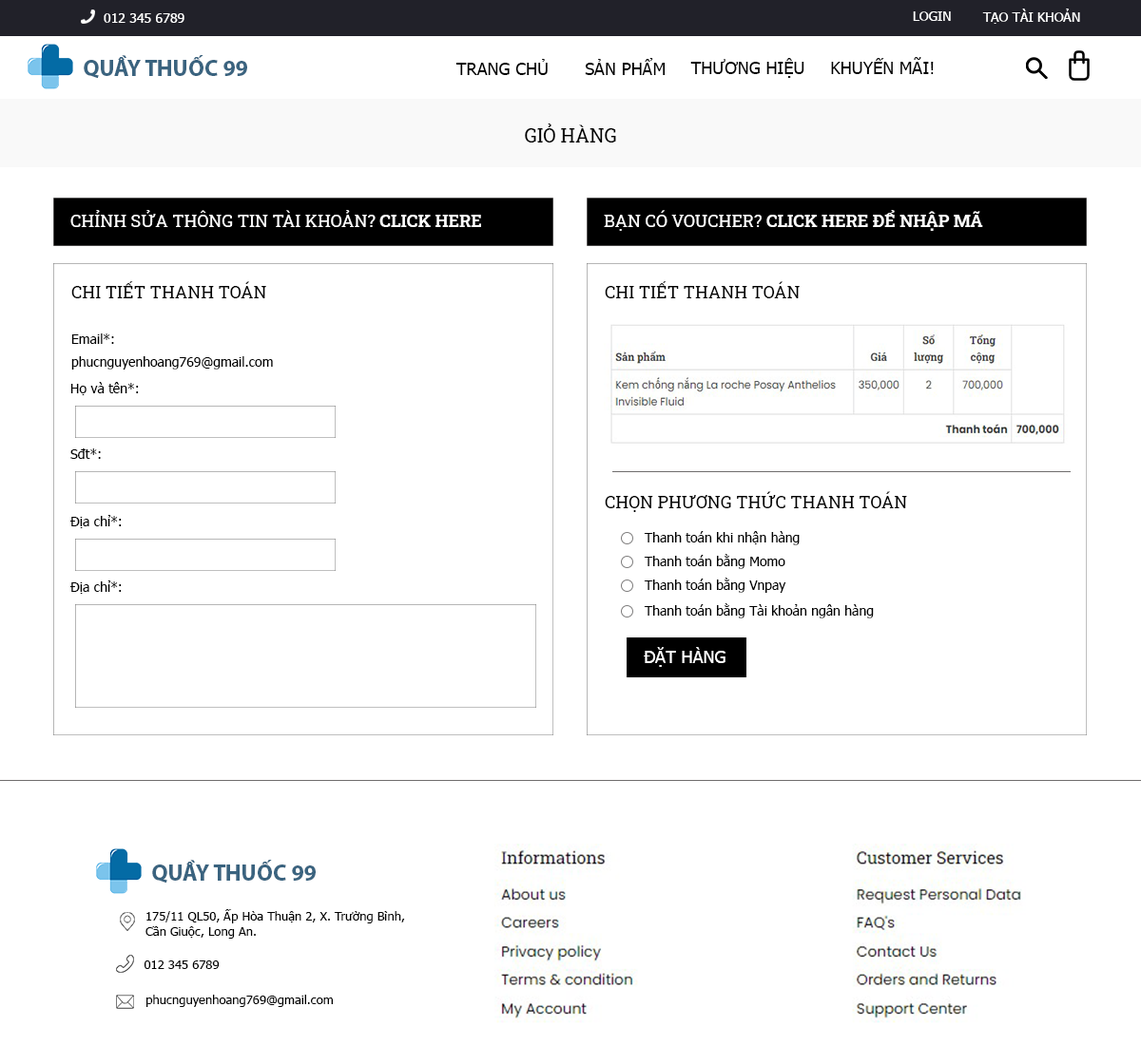
<style>
.page{position:relative;width:1141px;height:1045px;background:#ffffff}
.page>*{position:absolute;margin:0}
.t1{font:13.3px "Tahoma";color:#ffffff}
.t2{font:22.8px "MyriadPro-Bold";color:#3a637f}
.t3{font:17.1px "Tahoma";color:#000000}
.t4{font:19px "RobotoSlab-Regular";color:#000000}
.t5{font:17.1px "RobotoSlab-Regular";color:#ffffff}
.t6{font:17.1px "RobotoSlab-Bold";color:#ffffff}
.t7{font:13.3px/22.8px "Tahoma";color:#000000}
.t8{font:17.1px/22.8px "RobotoSlab-Regular";color:#000000}
.t9{font:17.1px "RobotoSlab-Regular";color:#000000}
.t10{font:13.3px "Tahoma";color:#000000}
.t11{font:17.1px "Tahoma";color:#ffffff}
.t12{font:12.4px "Tahoma";color:#000000}
</style>
<div class="page">
<p class="t1" style="left:104px;top:13px;width:80px;height:10px">012 345 6789</p>
<p class="t1" style="left:912px;top:11px;width:38px;height:10px">LOGIN</p>
<p class="t1" style="left:982px;top:9px;width:98px;height:15px">TẠO TÀI KHOẢN</p>
<p class="t2" style="left:84px;top:55px;width:163px;height:24px">QUẦY THUỐC 99</p>
<p class="t3" style="left:455px;top:59px;width:92px;height:16px">TRANG CHỦ</p>
<p class="t3" style="left:585px;top:58px;width:80px;height:17px">SẢN PHẨM</p>
<p class="t3" style="left:690px;top:58px;width:114px;height:20px">THƯƠNG HIỆU</p>
<p class="t3" style="left:831px;top:57px;width:102px;height:17px">KHUYẾN MÃI!</p>
<p class="t4" style="left:525px;top:124px;width:91px;height:19px">GIỎ HÀNG</p>
<p class="t5" style="left:70px;top:210px;width:411px;height:17px">CHỈNH SỬA THÔNG TIN TÀI KHOẢN? <span class="t6">CLICK HERE</span></p>
<p class="t6" style="left:604px;top:210px;width:379px;height:21px"><span class="t5">BẠN CÓ VOUCHER? </span>CLICK HERE ĐỂ NHẬP MÃ</p>
<p class="t7" style="left:71px;top:281px;width:202px;height:89px"><span class="t8">CHI TIẾT THANH TOÁN<br><br></span>Email*: <br>phucnguyenhoang769@gmail.com</p>
<p class="t9" style="left:604px;top:281px;width:195px;height:17px">CHI TIẾT THANH TOÁN</p>
<p class="t10" style="left:70px;top:382px;width:69px;height:13px">Họ và tên*:</p>
<p class="t10" style="left:70px;top:449px;width:31px;height:10px">Sđt*:</p>
<p class="t9" style="left:604px;top:491px;width:303px;height:21px">CHỌN PHƯƠNG THỨC THANH TOÁN</p>
<p class="t10" style="left:70px;top:515px;width:52px;height:13px">Địa chỉ*:</p>
<p class="t10" style="left:643px;top:531px;width:156px;height:15px">Thanh toán khi nhận hàng</p>
<p class="t10" style="left:643px;top:554px;width:142px;height:15px">Thanh toán bằng Momo</p>
<p class="t10" style="left:70px;top:581px;width:52px;height:13px">Địa chỉ*:</p>
<p class="t10" style="left:643px;top:578px;width:143px;height:15px">Thanh toán bằng Vnpay</p>
<p class="t10" style="left:643px;top:604px;width:230px;height:15px">Thanh toán bằng Tài khoản ngân hàng</p>
<p class="t11" style="left:643px;top:647px;width:82px;height:20px">ĐẶT HÀNG</p>
<p class="t2" style="left:152px;top:860px;width:164px;height:24px">QUẦY THUỐC 99</p>
<p class="t12" style="left:145px;top:910px;width:260px;height:29px">175/11 QL50, Ấp Hòa Thuận 2, X. Trường Bình, <br>Cần Giuộc, Long An.</p>
<p class="t12" style="left:144px;top:961px;width:76px;height:8px">012 345 6789</p>
<p class="t12" style="left:146px;top:995px;width:187px;height:12px">phucnguyenhoang769@gmail.com</p>
</div>
